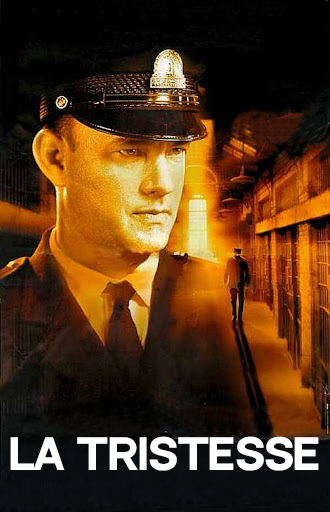
<style>
.page{position:relative;width:330px;height:512px}
.page>*{position:absolute;margin:0}
.t1{font:40.4px "NeutralFaceBold";letter-spacing:0.005em;color:#ffffff}
</style>
<div class="page">
<p class="t1" style="left:10px;top:436px;width:309px;height:35px">la tristesse</p>
</div>
